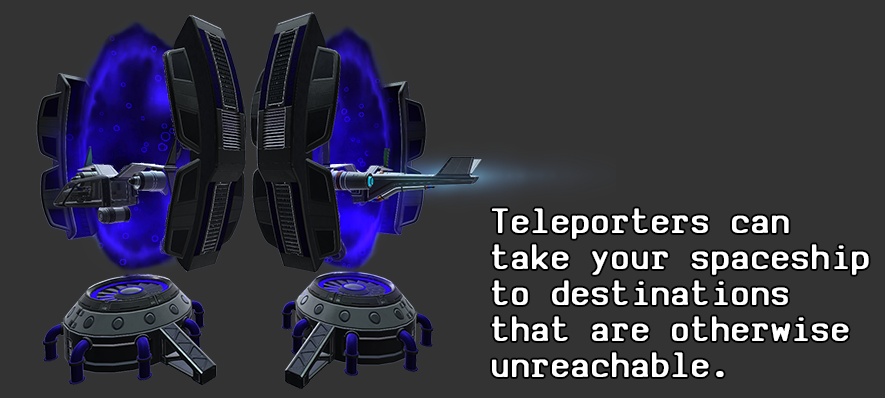
<style>
.page{position:relative;width:885px;height:398px;background:#333333}
.page>*{position:absolute;margin:0}
.t1{font:37.8px/36px "SVBasicManual-Bold";letter-spacing:0.05em;color:#ffffff;scale:0.95 1}
</style>
<div class="page">
<p class="t1" style="left:492px;top:208px;width:377px;height:169px">Teleporters can<br>take your spaceship<br>to destinations<br>that are otherwise <br>unreachable.</p>
</div>
